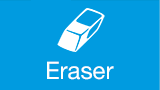
<style>
.page{position:relative;width:160px;height:90px;background:#009be0}
.page>*{position:absolute;margin:0}
.t1{font:24px "HelveticaNeue";color:#fefffe}
</style>
<div class="page">
<p class="t1" style="left:47px;top:61px;width:67px;height:19px">Eraser</p>
</div>
